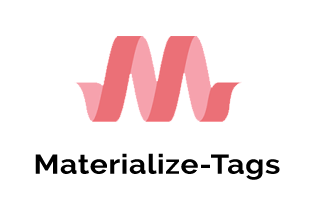
<style>
.page{position:relative;width:316px;height:210px;background:#ffffff}
.page>*{position:absolute;margin:0}
.t1{font:27.3px "Raleway-Bold";letter-spacing:0.02em;color:#000000;scale:1.1 1}
</style>
<div class="page">
<p class="t1" style="left:35px;top:153px;width:245px;height:27px">Materialize-Tags</p>
</div>
